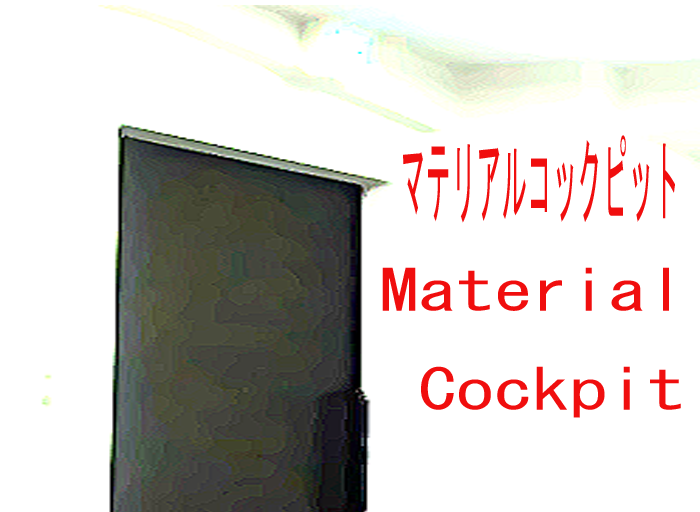
<style>
.page{position:relative;width:700px;height:512px;background:#ffffff}
.page>*{position:absolute;margin:0}
.t1{font:95.9px "MS-Gothic";color:#f00e0e;scale:0.26 1}
.t2{font:56.3px "MS-Gothic";color:#f00e0e;scale:1.36 1}
</style>
<div class="page">
<p class="t1" style="left:403px;top:135px;width:272px;height:88px">マテリアルコックピット</p>
<p class="t2" style="left:382px;top:267px;width:299px;height:151px">Material<br> Cockpit</p>
</div>
